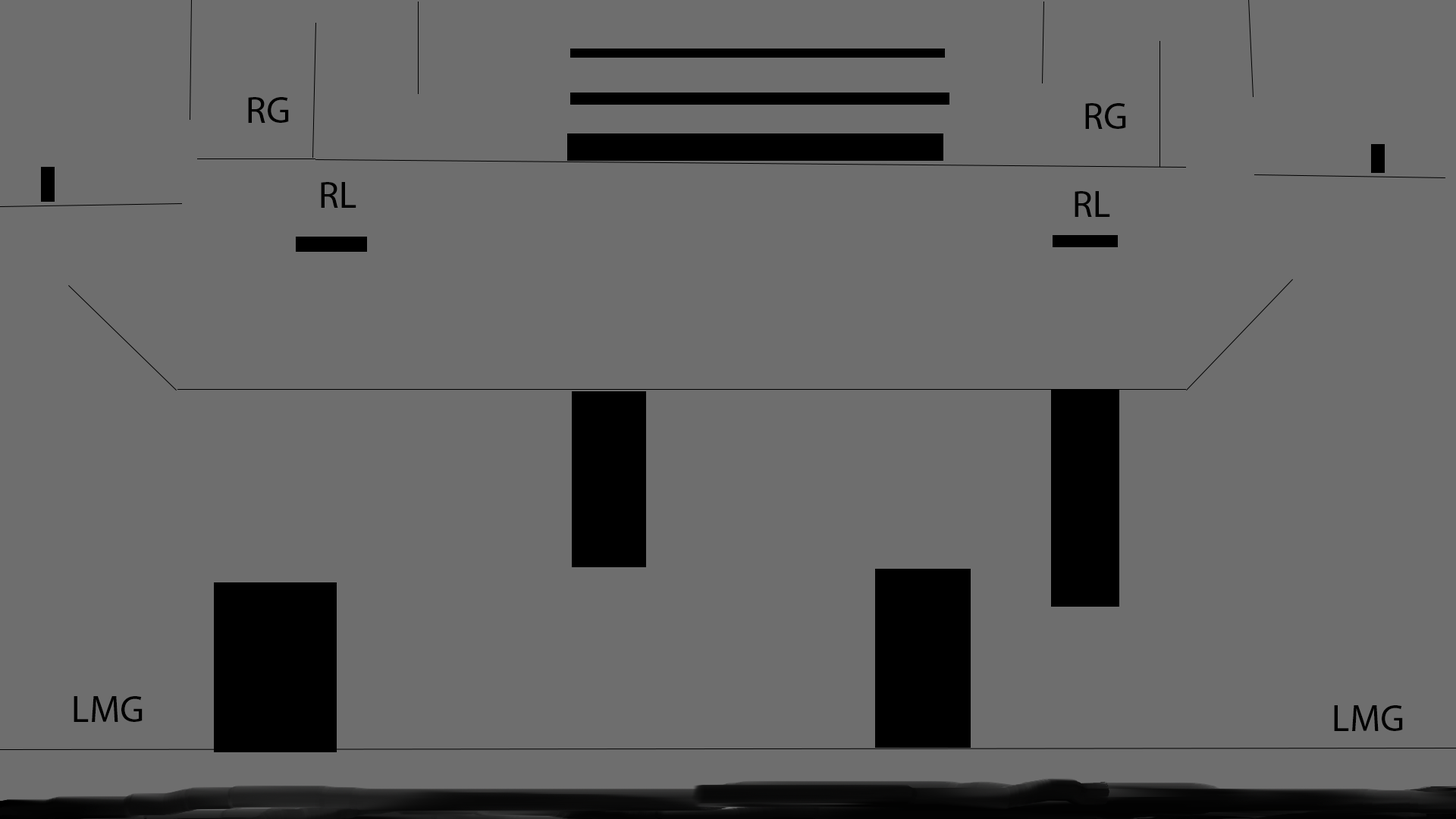
<style>
.page{position:relative;width:1456px;height:819px;background:#6e6e6e}
.page>*{position:absolute;margin:0}
.t1{font:37.9px "MyriadPro-Regular";color:#000000}
</style>
<div class="page">
<p class="t1" style="left:248px;top:97px;width:41px;height:26px">RG</p>
<p class="t1" style="left:1085px;top:103px;width:41px;height:26px">RG</p>
<p class="t1" style="left:321px;top:182px;width:35px;height:26px">RL</p>
<p class="t1" style="left:1075px;top:191px;width:35px;height:26px">RL</p>
<p class="t1" style="left:74px;top:696px;width:69px;height:26px">LMG</p>
<p class="t1" style="left:1334px;top:705px;width:69px;height:26px">LMG</p>
</div>
